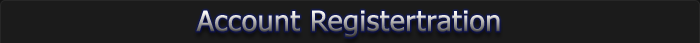
<style>
.page{position:relative;width:700px;height:43px;background:#1b1b1b}
.page>*{position:absolute;margin:0}
.t1{font:28px "Tahoma";font-weight:bold}
</style>
<div class="page">
<p class="t1" style="left:196px;top:10px;width:304px;height:28px">Account Registertration</p>
</div>
